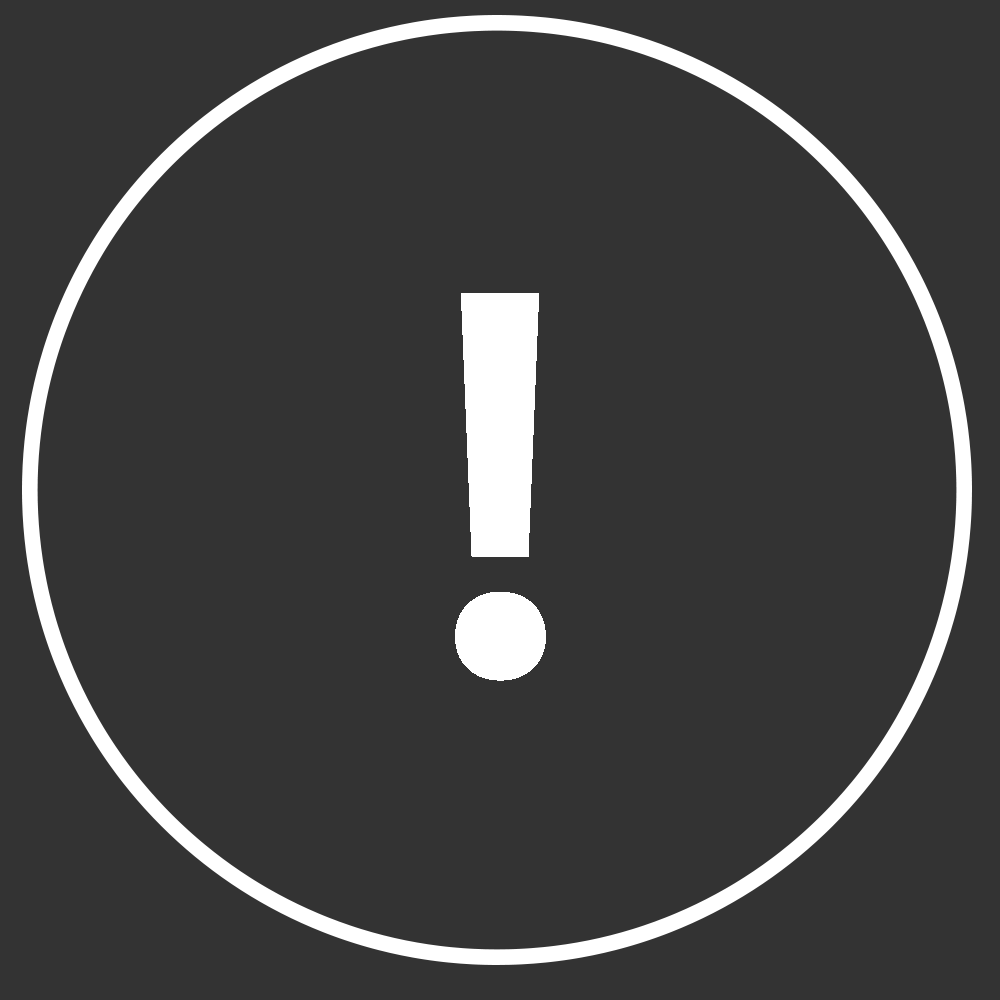
<style>
.page{position:relative;width:1000px;height:1000px;background:#333333}
.page>*{position:absolute;margin:0}
.t1{font:564.7px "MyriadPro-Semibold";color:#ffffff;font-variant:small-caps;scale:1.05 1}
</style>
<div class="page">
<p class="t1" style="left:455px;top:293px;width:91px;height:388px">!</p>
</div>
